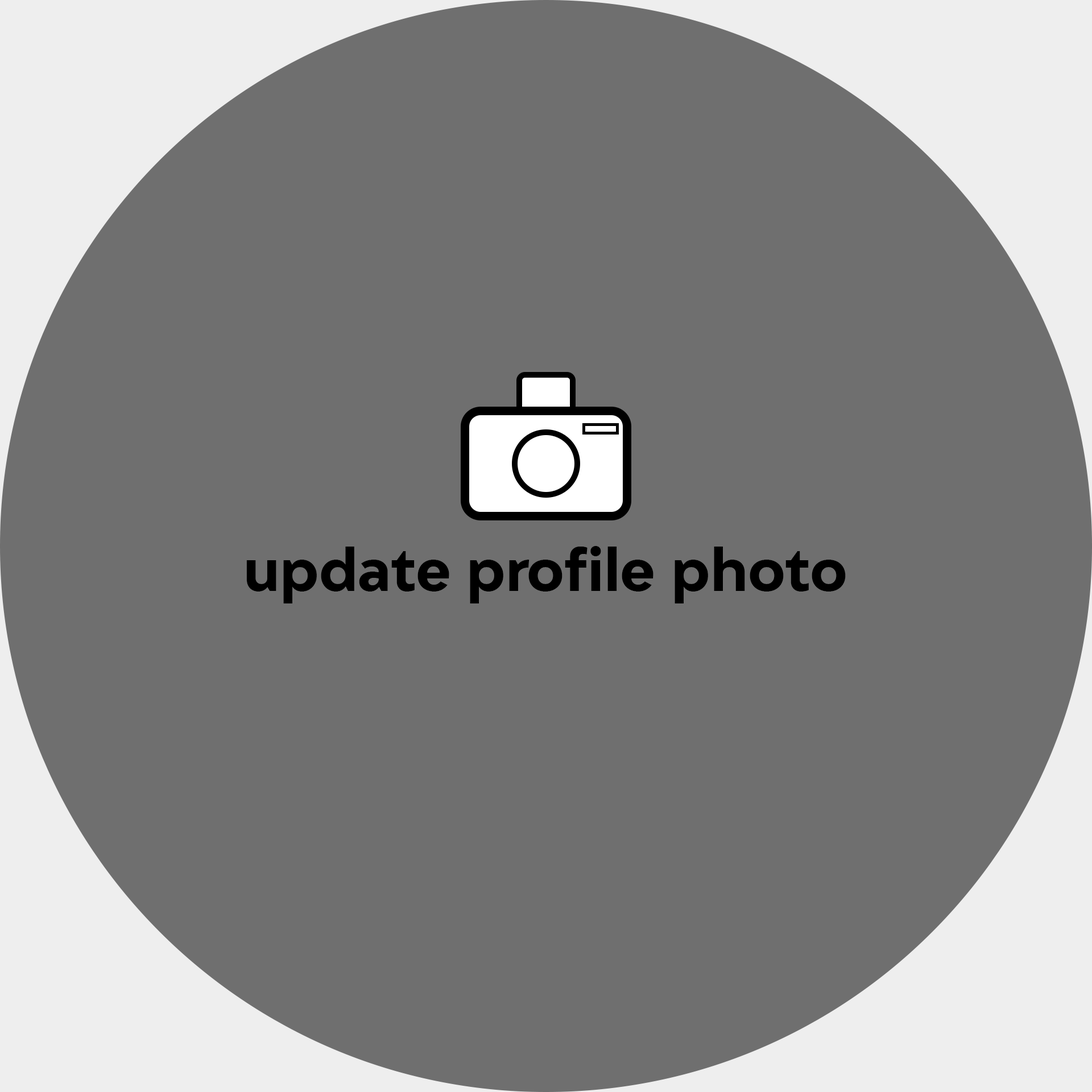
<style>
.page{position:relative;width:1092px;height:1092px;background:#6f6f6f}
.page>*{position:absolute;margin:0}
.t1{font:56.9px "Adlinnaka-BoldDemo";color:#000000}
</style>
<div class="page">
<p class="t1" style="left:246px;top:546px;width:600px;height:57px">update profile photo</p>
</div>
